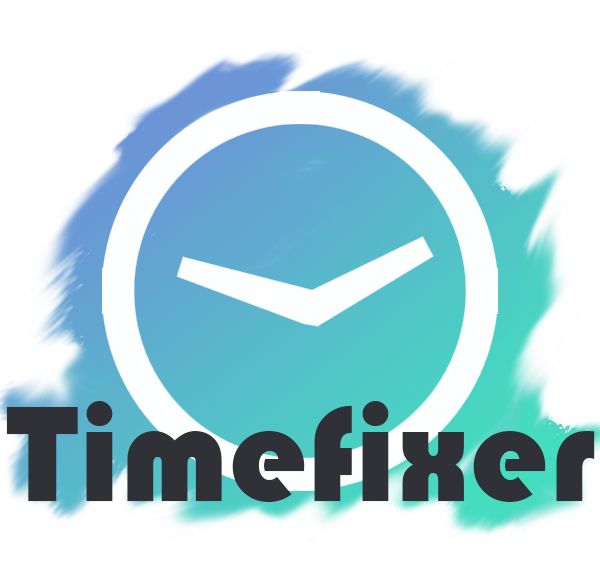
<style>
.page{position:relative;width:600px;height:582px;background:#ffffff}
.page>*{position:absolute;margin:0}
.t1{font:140.9px "Bauhaus93";color:#2f3136}
</style>
<div class="page">
<p class="t1" style="left:6px;top:401px;width:589px;height:101px">Timefixer</p>
</div>
